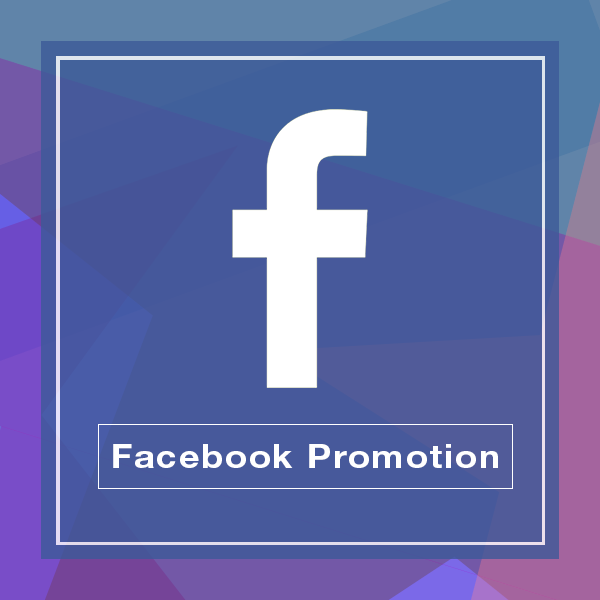
<style>
.page{position:relative;width:600px;height:600px;background:#47599b}
.page>*{position:absolute;margin:0}
.t1{font:32.4px "HelveticaNeueLTStd-Bd";letter-spacing:0.05em;color:#ffffff;scale:1.11 1}
</style>
<div class="page">
<p class="t1" style="left:113px;top:444px;width:385px;height:24px">Facebook Promotion</p>
</div>
